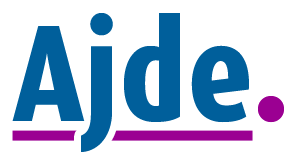
<style>
.page{position:relative;width:297px;height:163px;background:#ffffff}
.page>*{position:absolute;margin:0}
.t1{font:138px "DaxCondensed-ExtraBold";color:#005f9b}
.t2{font:138px "DaxCondensed-ExtraBold";color:#9b0092}
</style>
<div class="page">
<p class="t1" style="left:12px;top:13px;width:272px;height:139px">Ajde<span class="t2">.</span></p>
</div>
